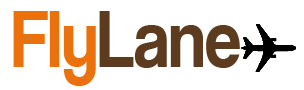
<style>
.page{position:relative;width:304px;height:90px;background:#ffffff}
.page>*{position:absolute;margin:0}
.t1{font:82.1px "CoolveticaRg-Regular";color:#5d3b1f;scale:0.88 1}
.t2{font:82.1px "CoolveticaRg-Regular";color:#eb710d;scale:0.88 1}
</style>
<div class="page">
<p class="t1" style="left:13px;top:11px;width:227px;height:75px"><span class="t2">Fly</span>Lane</p>
</div>
